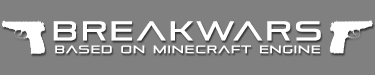
<style>
.page{position:relative;width:375px;height:75px;background:#808080}
.page>*{position:absolute;margin:0}
.t1{font:10.6px "Pirulen";letter-spacing:0.1em;color:#ffffff;font-weight:bold;scale:1.03 1}
.t2{font:27px "Pirulen";letter-spacing:0.1em;color:#ffffff;font-weight:bold;scale:1.03 1}
</style>
<div class="page">
<p class="t1" style="left:53px;top:21px;width:268px;height:33px;text-align:center"><span class="t2">breakwars<br></span>based on minecraft engine</p>
</div>
